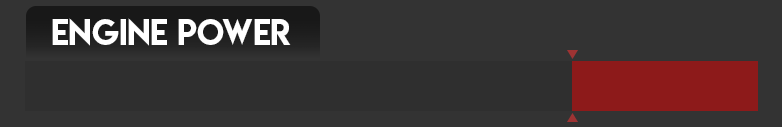
<style>
.page{position:relative;width:782px;height:127px;background:#333333}
.page>*{position:absolute;margin:0}
.t1{font:32px "LemonMilk";color:#ffffff}
</style>
<div class="page">
<p class="t1" style="left:52px;top:18px;width:239px;height:28px">ENGINE POWER</p>
</div>
